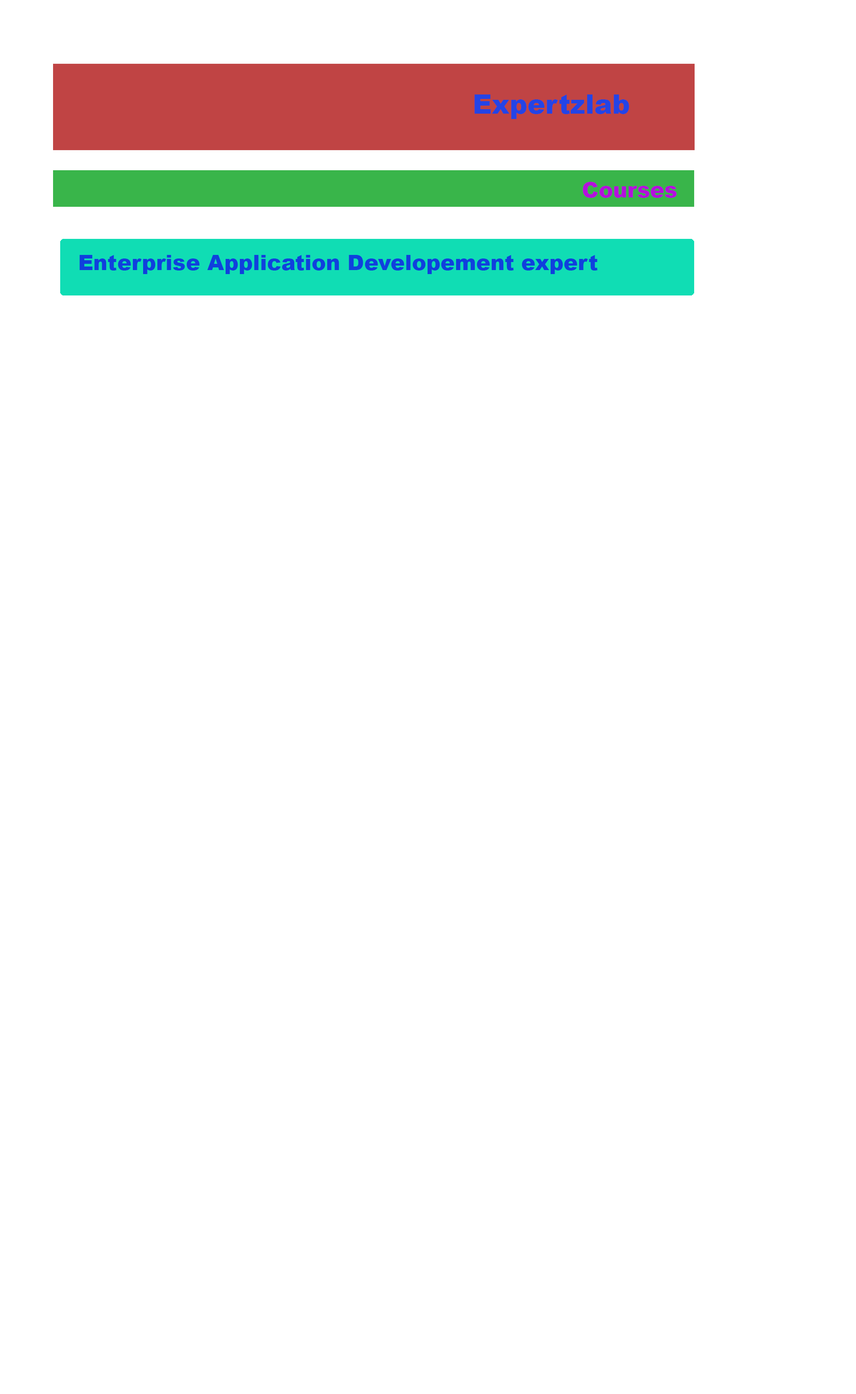
<style>
.page{position:relative;width:856px;height:1394px;background:#ffffff}
.page>*{position:absolute;margin:0}
.t1{font:26.7px "Arial-Black";color:#2444e6}
.t2{font:21.4px "Arial-Black";color:#b410dd}
.t3{font:21.4px "Arial-Black";color:#1040dd}
</style>
<div class="page">
<p class="t1" style="left:474px;top:94px;width:155px;height:25px">Expertzlab</p>
<p class="t2" style="left:582px;top:182px;width:94px;height:16px">Courses</p>
<p class="t3" style="left:79px;top:255px;width:518px;height:19px">Enterprise Application Developement expert</p>
</div>
